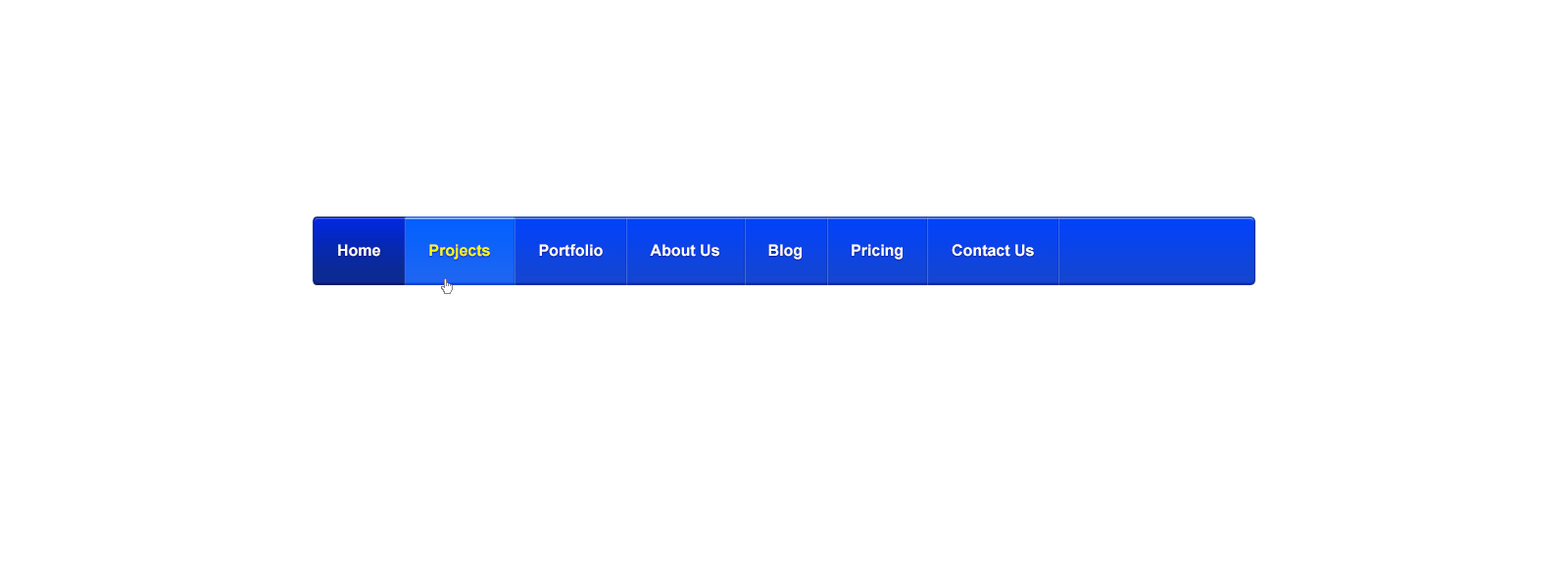
<style>
.page{position:relative;width:1568px;height:588px;background:#ffffff}
.page>*{position:absolute;margin:0}
.t1{font:15.7px "Arial-BoldMT";color:#ffffff}
.t2{font:15.7px "Arial-BoldMT";color:#fdfa0a}
</style>
<div class="page">
<p class="t1" style="left:338px;top:244px;width:696px;height:16px">Home           <span class="t2">Projects</span>           Portfolio           About Us           Blog           Pricing           Contact Us</p>
</div>
